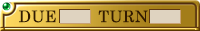
<style>
.page{position:relative;width:200px;height:31px}
.page>*{position:absolute;margin:0}
.t1{font:16px "CenturySchoolbook";letter-spacing:0.025em;color:#321a02}
</style>
<div class="page">
<p class="t1" style="left:19px;top:10px;width:37px;height:13px">DUE</p>
<p class="t1" style="left:98px;top:10px;width:50px;height:13px">TURN</p>
</div>
